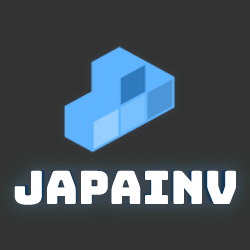
<style>
.page{position:relative;width:250px;height:250px;background:#333333}
.page>*{position:absolute;margin:0}
.t1{font:45.8px "BungeeLayers-Regular";color:#ffffff}
</style>
<div class="page">
<p class="t1" style="left:14px;top:170px;width:222px;height:35px">JAPAINV</p>
</div>
